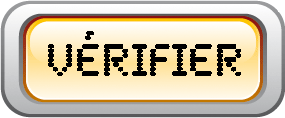
<style>
.page{position:relative;width:285px;height:118px}
.page>*{position:absolute;margin:0}
.t1{font:48px "SynchroLET";color:#000000}
</style>
<div class="page">
<p class="t1" style="left:48px;top:31px;width:193px;height:45px">Vérifier</p>
</div>
